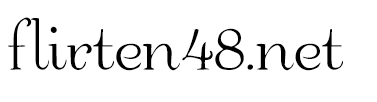
<style>
.page{position:relative;width:377px;height:102px;background:#ffffff}
.page>*{position:absolute;margin:0}
.t1{font:77.3px "BauderieScriptSSi";color:#010101}
</style>
<div class="page">
<p class="t1" style="left:8px;top:17px;width:335px;height:54px">flirten48.net</p>
</div>
